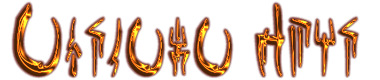
<style>
.page{position:relative;width:380px;height:80px;background:#ffffff}
.page>*{position:absolute;margin:0}
.t1{font:72px "Vampyrium"}
</style>
<div class="page">
<p class="t1" style="left:14px;top:4px;width:344px;height:73px">Extreme Hunt</p>
</div>
